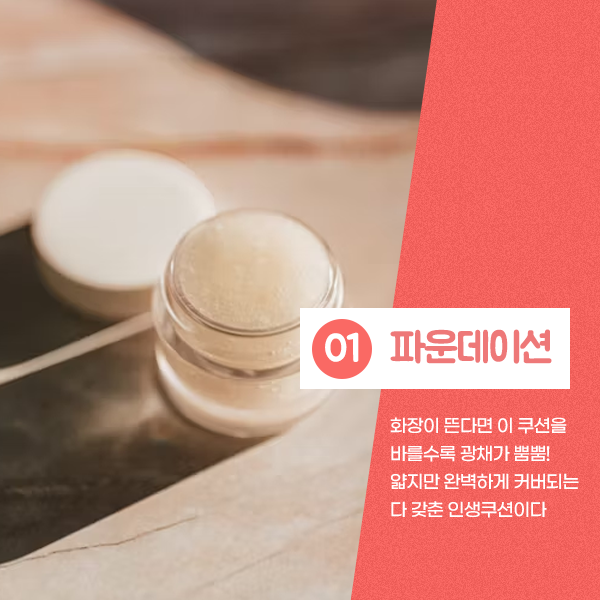
<style>
.page{position:relative;width:600px;height:600px}
.page>*{position:absolute;margin:0}
.t1{font:42px "BMJUA";letter-spacing:-0.05em;color:#ee7878}
.t2{font:40px "BMJUA";letter-spacing:-0.05em;color:#ffffff}
.t3{font:18px/28px "GmarketSansMedium";letter-spacing:-0.05em;color:#ffffff}
</style>
<div class="page">
<p class="t1" style="left:390px;top:329px;width:162px;height:35px">파운데이션</p>
<p class="t2" style="left:325px;top:332px;width:34px;height:30px">01</p>
<p class="t3" style="left:390px;top:417px;width:189px;height:101px">화장이 뜬다면 이 쿠션을<br>바를수록 광채가 뿜뿜!<br>얇지만 완벽하게 커버되는<br>다 갖춘 인생쿠션이다</p>
</div>
